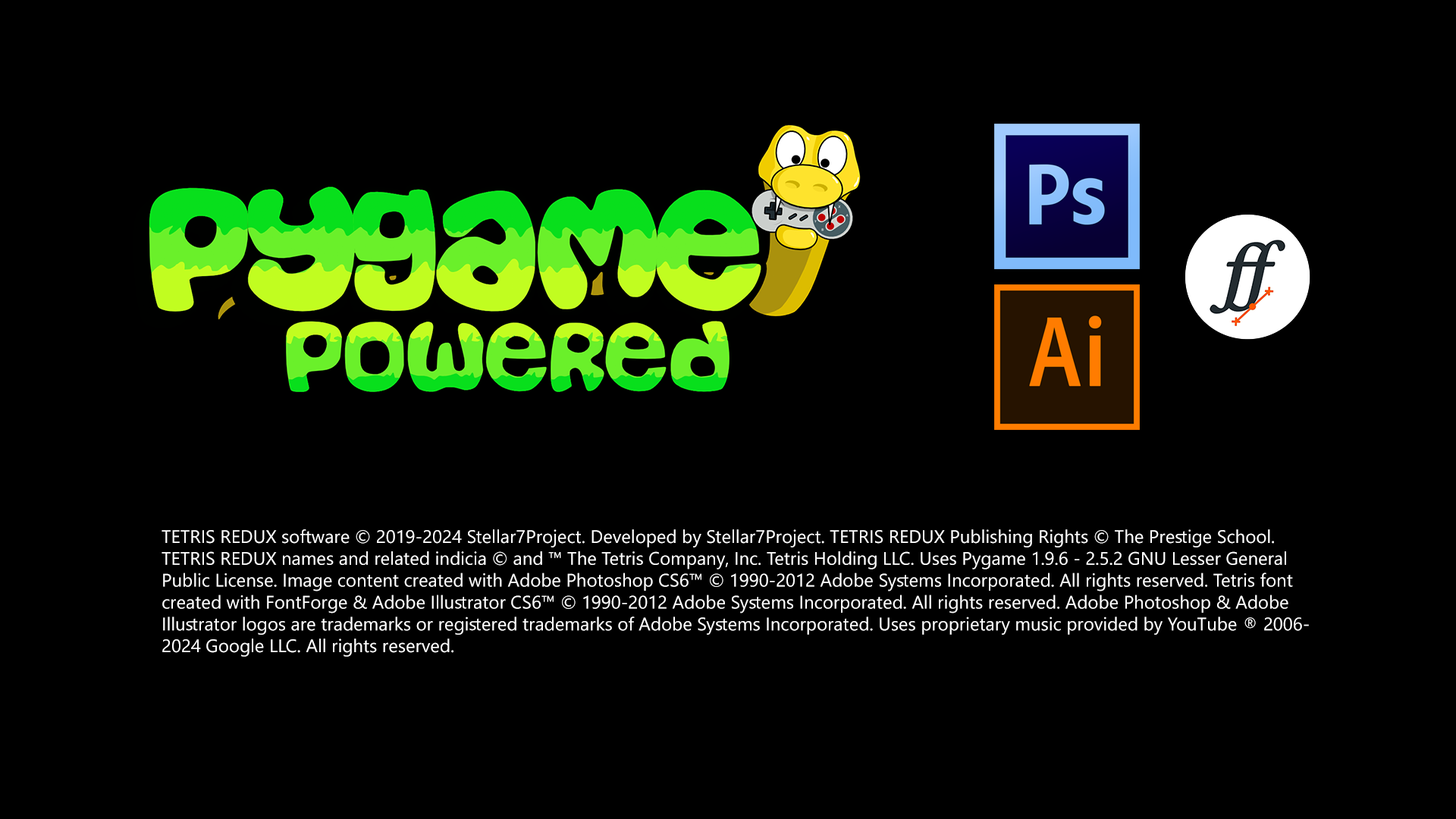
<style>
.page{position:relative;width:1456px;height:819px;background:#000000}
.page>*{position:absolute;margin:0}
.t1{font:18.2px "SegoeUI";color:#ffffff}
</style>
<div class="page">
<p class="t1" style="left:162px;top:529px;width:1147px;height:128px">TETRIS REDUX software © 2019-2024 Stellar7Project. Developed by Stellar7Project. TETRIS REDUX Publishing Rights © The Prestige School.<br>TETRIS REDUX names and related indicia © and ™ The Tetris Company, Inc. Tetris Holding LLC. Uses Pygame 1.9.6 - 2.5.2 GNU Lesser General <br>Public License. Image content created with Adobe Photoshop CS6™ © 1990-2012 Adobe Systems Incorporated. All rights reserved. Tetris font <br>created with FontForge &amp; Adobe Illustrator CS6™ © 1990-2012 Adobe Systems Incorporated. All rights reserved. Adobe Photoshop &amp; Adobe <br>Illustrator logos are trademarks or registered trademarks of Adobe Systems Incorporated. Uses proprietary music provided by YouTube ® 2006-<br>2024 Google LLC. All rights reserved.</p>
</div>
